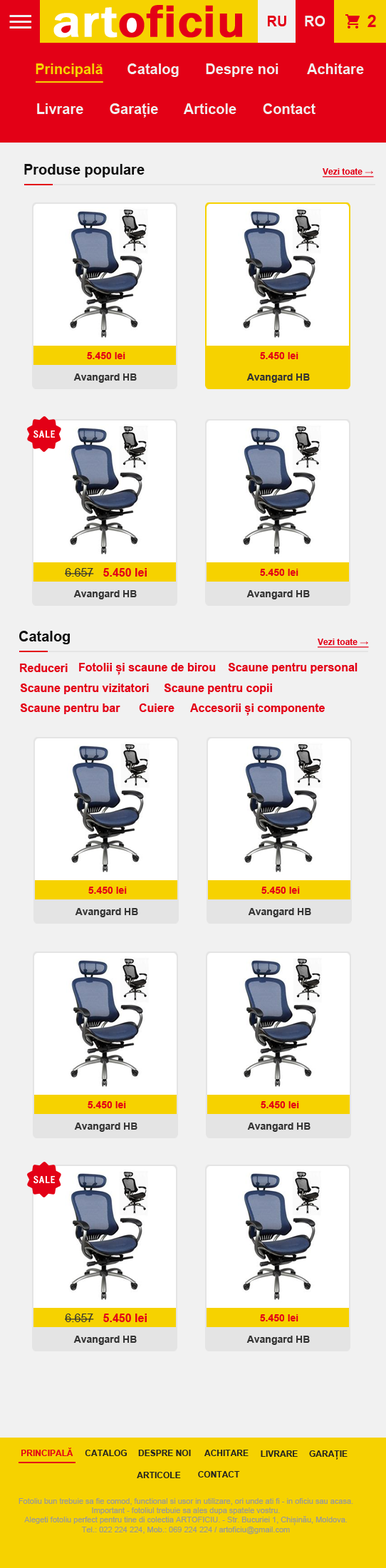
<style>
.page{position:relative;width:386px;height:1568px;background:#f1f1f1}
.page>*{position:absolute;margin:0}
.t1{font:46.2px "FranklinGothic-Medium";color:#e30016;font-weight:bold;scale:1.11 1}
.t2{font:46.2px "FranklinGothic-Medium";color:#ffffff;font-weight:bold;scale:1.11 1}
.t3{font:14.3px "Arial-BoldMT";color:#e30016;text-transform:uppercase}
.t4{font:14.3px "Arial-BoldMT";color:#f1f1f1;text-transform:uppercase}
.t5{font:17.1px "Arial-BoldMT";color:#e30016}
.t6{font:14.3px "Arial-BoldMT";color:#f6d200}
.t7{font:14.3px "Arial-BoldMT";color:#f1f1f1}
.t8{font:14.3px "Arial-BoldMT";color:#111111}
.t9{font:8.6px "Arial-BoldMT";color:#e30016;text-decoration:underline}
.t10{font:10px "Arial-BoldMT";color:#e30016}
.t11{font:10px "Arial-BoldMT";color:#333333}
.t12{font:11.4px "Arial-BoldMT";color:#e30016}
.t13{font:11.4px "ArialMT";color:#333333}
.t14{font:8.6px "Arial-BoldMT";color:#e30016;text-transform:uppercase}
.t15{font:8.6px "Arial-BoldMT";color:#222222;text-transform:uppercase}
.t16{font:7.8px "ArialMT";color:#999999}
</style>
<div class="page">
<p class="t1" style="left:53px;top:5px;width:189px;height:33px"><span class="t2">art</span>oficiu</p>
<p class="t3" style="left:268px;top:16px;width:19px;height:10px">ru</p>
<p class="t4" style="left:305px;top:16px;width:21px;height:10px">ro</p>
<p class="t5" style="left:368px;top:14px;width:8px;height:13px">2</p>
<p class="t6" style="left:36px;top:63px;width:67px;height:14px">Principală</p>
<p class="t7" style="left:128px;top:63px;width:51px;height:14px">Catalog</p>
<p class="t7" style="left:206px;top:63px;width:73px;height:14px">Despre noi</p>
<p class="t7" style="left:307px;top:63px;width:57px;height:11px">Achitare</p>
<p class="t7" style="left:37px;top:103px;width:46px;height:11px">Livrare</p>
<p class="t7" style="left:110px;top:103px;width:48px;height:15px">Garație</p>
<p class="t7" style="left:183px;top:103px;width:54px;height:11px">Articole</p>
<p class="t7" style="left:263px;top:103px;width:53px;height:11px">Contact</p>
<p class="t8" style="left:24px;top:164px;width:121px;height:13px">Produse populare</p>
<p class="t9" style="left:323px;top:168px;width:51px;height:9px">Vezi toate →</p>
<p class="t10" style="left:87px;top:352px;width:38px;height:7px">5.450 lei</p>
<p class="t10" style="left:260px;top:352px;width:39px;height:7px">5.450 lei</p>
<p class="t11" style="left:73px;top:373px;width:64px;height:10px">Avangard HB</p>
<p class="t11" style="left:247px;top:373px;width:63px;height:10px">Avangard HB</p>
<p class="t12" style="left:65px;top:568px;width:82px;height:9px"><span class="t13">6.657</span>   5.450 lei</p>
<p class="t10" style="left:260px;top:569px;width:39px;height:7px">5.450 lei</p>
<p class="t11" style="left:73px;top:590px;width:64px;height:9px">Avangard HB</p>
<p class="t11" style="left:247px;top:590px;width:63px;height:9px">Avangard HB</p>
<p class="t8" style="left:19px;top:631px;width:51px;height:13px">Catalog</p>
<p class="t9" style="left:318px;top:639px;width:51px;height:9px">Vezi toate →</p>
<p class="t12" style="left:20px;top:664px;width:48px;height:8px">Reduceri</p>
<p class="t12" style="left:79px;top:663px;width:137px;height:12px">Fotolii și scaune de birou</p>
<p class="t12" style="left:228px;top:663px;width:130px;height:11px">Scaune pentru personal</p>
<p class="t12" style="left:20px;top:684px;width:129px;height:10px">Scaune pentru vizitatori</p>
<p class="t12" style="left:164px;top:684px;width:108px;height:10px">Scaune pentru copii</p>
<p class="t12" style="left:20px;top:703px;width:100px;height:11px">Scaune pentru bar</p>
<p class="t12" style="left:139px;top:703px;width:36px;height:9px">Cuiere</p>
<p class="t12" style="left:190px;top:703px;width:135px;height:13px">Accesorii și componente</p>
<p class="t10" style="left:88px;top:887px;width:39px;height:7px">5.450 lei</p>
<p class="t10" style="left:262px;top:887px;width:38px;height:7px">5.450 lei</p>
<p class="t11" style="left:75px;top:908px;width:63px;height:9px">Avangard HB</p>
<p class="t11" style="left:248px;top:908px;width:63px;height:9px">Avangard HB</p>
<p class="t10" style="left:88px;top:1101px;width:38px;height:7px">5.450 lei</p>
<p class="t10" style="left:261px;top:1101px;width:38px;height:7px">5.450 lei</p>
<p class="t11" style="left:74px;top:1123px;width:64px;height:9px">Avangard HB</p>
<p class="t11" style="left:247px;top:1123px;width:64px;height:9px">Avangard HB</p>
<p class="t12" style="left:65px;top:1314px;width:82px;height:8px"><span class="t13">6.657</span>   5.450 lei</p>
<p class="t10" style="left:260px;top:1314px;width:39px;height:7px">5.450 lei</p>
<p class="t11" style="left:73px;top:1336px;width:64px;height:9px">Avangard HB</p>
<p class="t11" style="left:247px;top:1336px;width:63px;height:9px">Avangard HB</p>
<p class="t14" style="left:21px;top:1448px;width:52px;height:8px">Principală</p>
<p class="t15" style="left:85px;top:1450px;width:42px;height:6px">Catalog</p>
<p class="t15" style="left:138px;top:1450px;width:53px;height:6px">Despre noi</p>
<p class="t15" style="left:205px;top:1450px;width:44px;height:6px">Achitare</p>
<p class="t15" style="left:261px;top:1450px;width:37px;height:7px">Livrare</p>
<p class="t15" style="left:309px;top:1450px;width:39px;height:10px">Garație</p>
<p class="t15" style="left:137px;top:1472px;width:44px;height:6px">Articole</p>
<p class="t15" style="left:198px;top:1471px;width:42px;height:6px">Contact</p>
<p class="t16" style="left:19px;top:1498px;width:335px;height:37px;text-align:center">Fotoliu bun trebuie sa fie comod, functional si usor in utilizare, ori unde ati fi - in oficiu sau acasa.<br>Important - fotoliul trebuie sa ales dupa spatele vostru.<br>Alegeti fotoliu perfect pentru tine di colectia ARTOFICIU. - Str. Bucuriei 1, Chișinău, Moldova.<br>Tel.: 022 224 224, Mob.: 069 224 224 / artoficiu@gmail.com</p>
</div>
